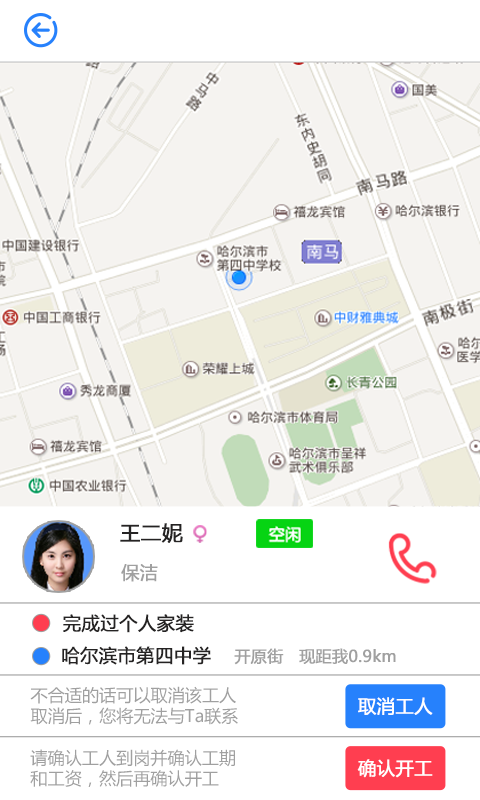
<style>
.page{position:relative;width:480px;height:800px;background:#ffffff}
.page>*{position:absolute;margin:0}
.t1{font:20.6px "MicrosoftYaHei";color:#252323;font-weight:bold}
.t2{font:18px "MicrosoftYaHei";color:#a0a0a0;font-weight:bold}
.t3{font:18.3px "MicrosoftYaHei";color:#252323;font-weight:bold}
.t4{font:16px "MicrosoftYaHei";color:#a0a0a0;font-weight:bold}
.t5{font:17.1px "MicrosoftYaHei";color:#a0a0a0}
.t6{font:18.3px "MicrosoftYaHei";color:#ffffff;font-weight:bold}
</style>
<div class="page">
<p class="t1" style="left:120px;top:523px;width:63px;height:20px">王二妮</p>
<p class="t2" style="left:121px;top:564px;width:37px;height:18px">保洁</p>
<p class="t3" style="left:63px;top:614px;width:131px;height:19px">完成过个人家装</p>
<p class="t3" style="left:62px;top:646px;width:149px;height:19px">哈尔滨市第四中学</p>
<p class="t4" style="left:234px;top:648px;width:162px;height:17px">开原街   现距我0.9km</p>
<p class="t5" style="left:30px;top:686px;width:208px;height:39px">不合适的话可以取消该工人<br>取消后，您将无法与Ta联系</p>
<p class="t6" style="left:358px;top:697px;width:75px;height:18px">取消工人</p>
<p class="t5" style="left:30px;top:749px;width:205px;height:38px">请确认工人到岗并确认工期<br>和工资，然后再确认开工</p>
<p class="t6" style="left:357px;top:759px;width:76px;height:19px">确认开工</p>
</div>
